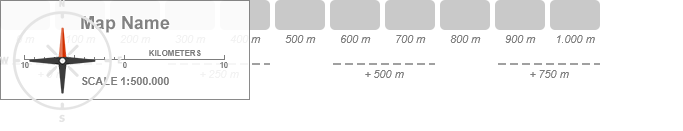
<style>
.page{position:relative;width:683px;height:131px;background:#ffffff}
.page>*{position:absolute;margin:0}
.t1{font:18px "Arial-BoldMT";color:#828282}
.t2{font:11px "Arial-ItalicMT";color:#f2f2f2}
.t3{font:11px "Arial-ItalicMT";color:#7d7d7d}
.t4{font:8px "Arial-BoldMT";color:#7d7d7d}
.t5{font:11px "Arial-BoldMT";color:#7d7d7d}
</style>
<div class="page">
<p class="t1" style="left:81px;top:16px;width:89px;height:17px">Map Name</p>
<p class="t2" style="left:16px;top:35px;width:19px;height:8px">0 m</p>
<p class="t2" style="left:66px;top:35px;width:30px;height:8px">100 m</p>
<p class="t2" style="left:120px;top:35px;width:31px;height:8px">200 m</p>
<p class="t2" style="left:175px;top:35px;width:31px;height:8px">300 m</p>
<p class="t2" style="left:230px;top:35px;width:31px;height:8px">400 m</p>
<p class="t3" style="left:285px;top:35px;width:31px;height:8px">500 m</p>
<p class="t3" style="left:341px;top:35px;width:30px;height:8px">600 m</p>
<p class="t3" style="left:396px;top:35px;width:30px;height:8px">700 m</p>
<p class="t3" style="left:450px;top:35px;width:31px;height:8px">800 m</p>
<p class="t3" style="left:505px;top:35px;width:31px;height:8px">900 m</p>
<p class="t3" style="left:557px;top:35px;width:38px;height:8px">1.000 m</p>
<p class="t4" style="left:149px;top:50px;width:52px;height:6px">KILOMETERS</p>
<p class="t4" style="left:21px;top:62px;width:8px;height:6px">10</p>
<p class="t4" style="left:123px;top:62px;width:4px;height:6px">0</p>
<p class="t4" style="left:220px;top:62px;width:8px;height:6px">10</p>
<p class="t5" style="left:82px;top:77px;width:87px;height:8px">SCALE 1:500.000</p>
<p class="t2" style="left:200px;top:70px;width:39px;height:8px">+ 250 m</p>
<p class="t3" style="left:365px;top:70px;width:39px;height:8px">+ 500 m</p>
<p class="t3" style="left:530px;top:70px;width:39px;height:8px">+ 750 m</p>
</div>
